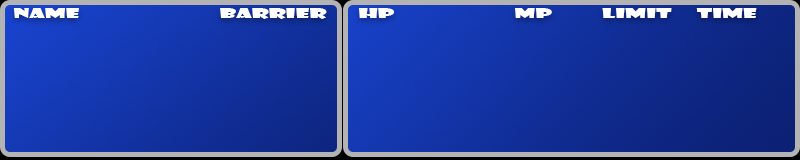
<style>
.page{position:relative;width:800px;height:160px}
.page>*{position:absolute;margin:0}
.t1{font:12.5px "ShowcardGothic-Reg";color:#ffffff;scale:2 1}
</style>
<div class="page">
<p class="t1" style="left:13px;top:8px;width:314px;height:11px">Name                            Barrier</p>
<p class="t1" style="left:358px;top:8px;width:399px;height:10px">HP                        MP          limit     time</p>
</div>
